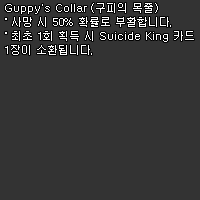
<style>
.page{position:relative;width:200px;height:200px;background:#333333}
.page>*{position:absolute;margin:0}
.t1{font:11px/14px "Dotum";color:#ffffff}
</style>
<div class="page">
<p class="t1" style="left:5px;top:3px;width:189px;height:52px">Guppy's Collar (구피의 목줄)<br>˚ 사망 시 50% 확률로 부활합니다.<br>˚ 최초 1회 획득 시 Suicide King 카드<br>1장이 소환됩니다.</p>
</div>
